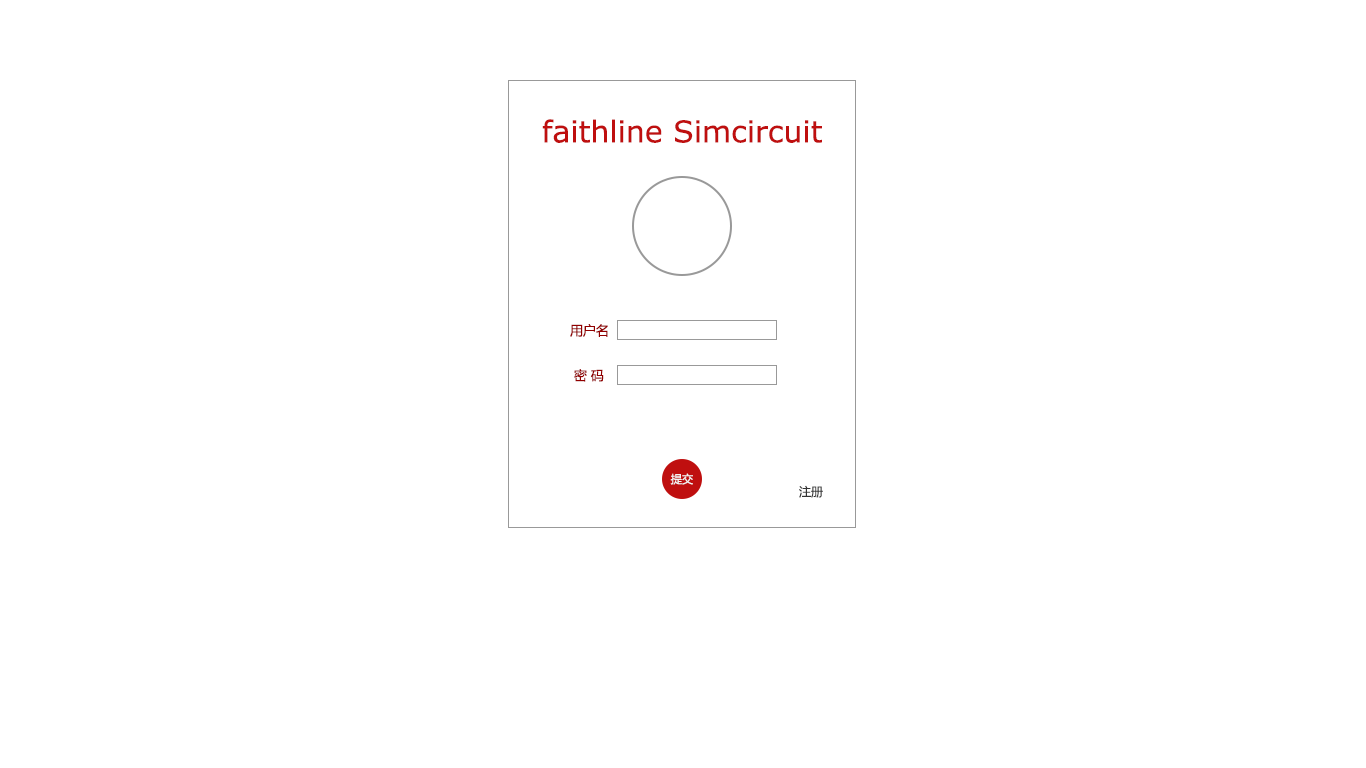
<style>
.page{position:relative;width:1366px;height:768px;background:#ffffff}
.page>*{position:absolute;margin:0}
.t1{font:30px "MSReferenceSansSerif";color:#bf0f0f}
.t2{font:13px "MicrosoftYaHei";color:#920000}
.t3{font:11.2px "MicrosoftYaHei";color:#f3f3f3}
.t4{font:12px "MicrosoftYaHei";color:#333333}
</style>
<div class="page">
<p class="t1" style="left:542px;top:119px;width:280px;height:24px">faithline Simcircuit</p>
<p class="t2" style="left:570px;top:324px;width:38px;height:13px">用户名</p>
<p class="t2" style="left:574px;top:369px;width:30px;height:13px">密 码</p>
<p class="t3" style="left:670px;top:473px;width:23px;height:12px">提交</p>
<p class="t4" style="left:799px;top:485px;width:24px;height:13px">注册</p>
</div>
